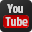
<style>
.page{position:relative;width:32px;height:32px}
.page>*{position:absolute;margin:0}
.t1{font:13px "MyriadPro-BoldCond";color:#d5d5d5}
</style>
<div class="page">
<p class="t1" style="left:7px;top:4px;width:16px;height:9px">You</p>
<p class="t1" style="left:7px;top:4px;width:16px;height:9px">You</p>
<p class="t1" style="left:5px;top:17px;width:23px;height:9px">Tube</p>
<p class="t1" style="left:5px;top:17px;width:23px;height:9px">Tube</p>
</div>
